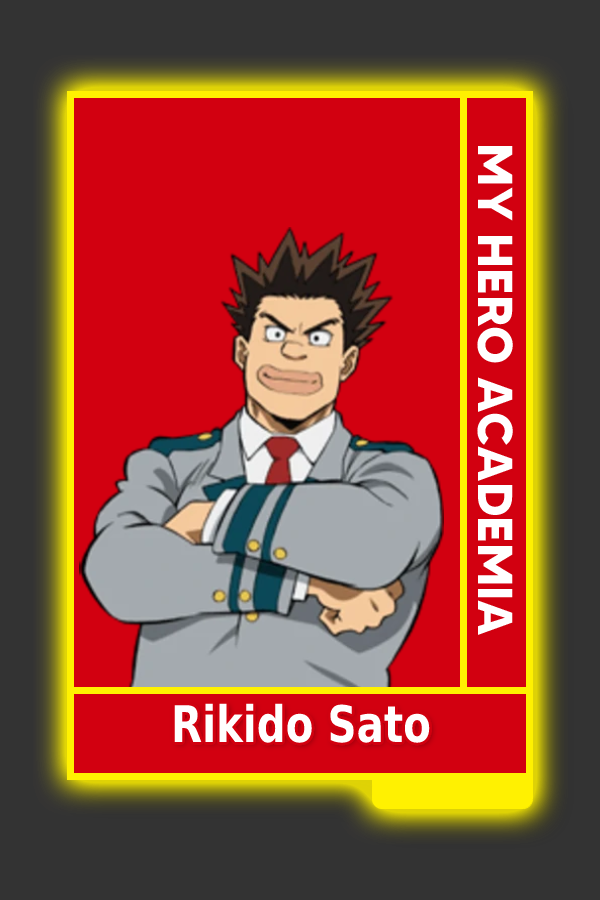
<style>
.page{position:relative;width:600px;height:900px;background:#d20010}
.page>*{position:absolute;margin:0}
.t1{font:48.8px "MADETOMMY-Bold";color:#ffffff}
.t2{font:50.5px "MADETOMMY-Bold";color:#ffffff;scale:0.8 1}
</style>
<div class="page">
<p class="t1" style="left:477px;top:146px;width:36px;height:489px;rotate:90deg">MY HERO ACADEMIA</p>
<p class="t2" style="left:174px;top:703px;width:256px;height:40px">Rikido Sato</p>
</div>
